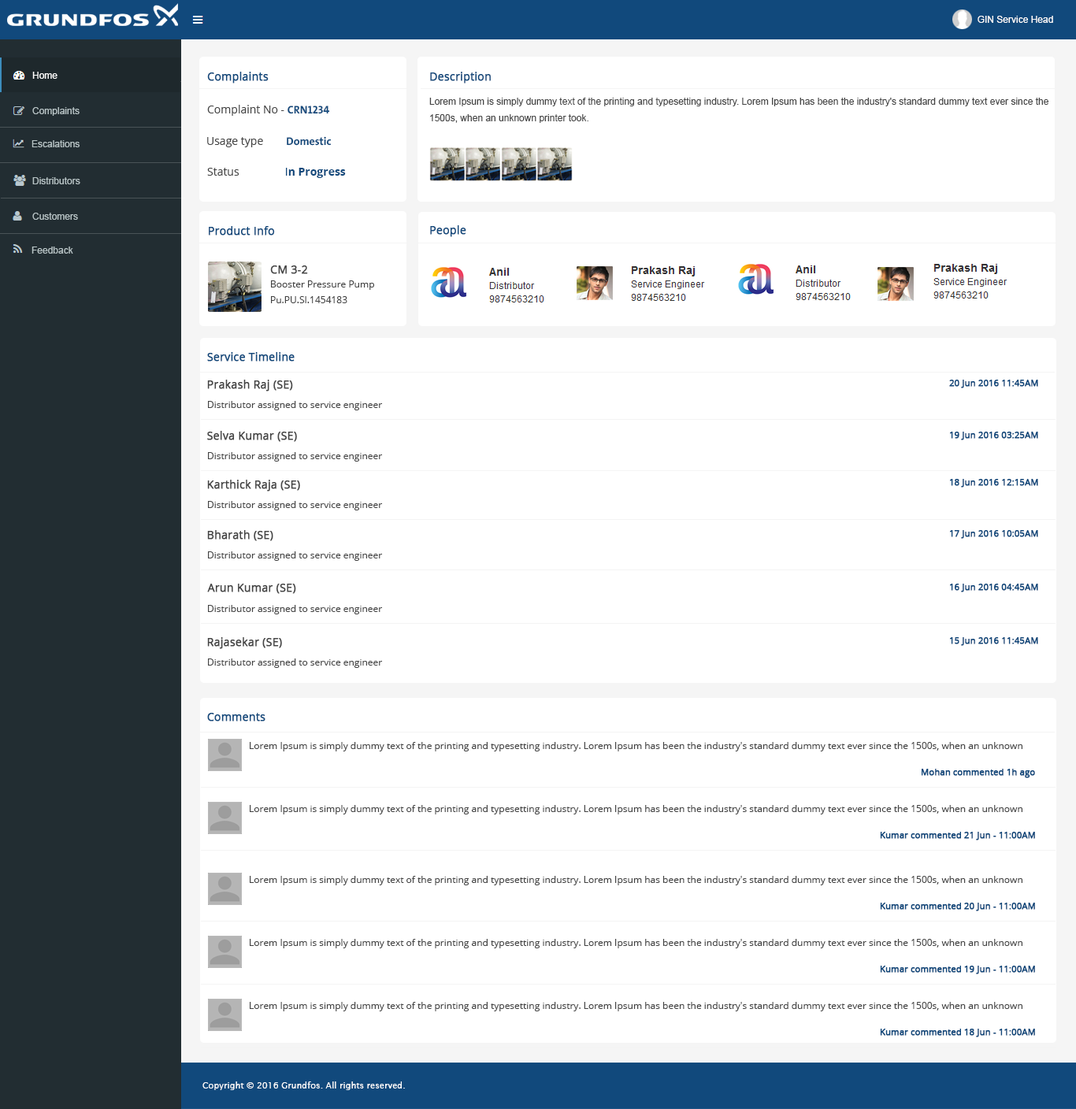
<style>
.page{position:relative;width:1076px;height:1109px;background:#ffffff}
.page>*{position:absolute;margin:0}
.t1{font:9.4px "ArialMT";color:#fffefd}
.t2{font:9.4px "ArialMT";color:#ffffff}
.t3{font:11px "OpenSans";color:#11497c;font-weight:bold}
.t4{font:11px "OpenSans"}
.t5{font:9.4px/16.5px "ArialMT";color:#444444}
.t6{font:9.4px "ArialMT";color:#b8c4c6}
.t7{font:11px "OpenSans";color:#444444}
.t8{font:11px "GrundfosTheSansOT-7B";color:#11497c}
.t9{font:11px "OpenSans-Bold";color:#11497c}
.t10{font:11px "OpenSans";color:#11497c}
.t11{font:11px "OpenSans";color:#444444;font-weight:bold}
.t12{font:9.4px "OpenSans";color:#444444}
.t13{font:8.7px "OpenSans";color:#11497c;font-weight:bold}
.t14{font:8.7px "LucidaSans";color:#fdffff}
</style>
<div class="page">
<p class="t1" style="left:977px;top:16px;width:76px;height:7px">GIN Service Head</p>
<p class="t2" style="left:32px;top:72px;width:25px;height:7px">Home</p>
<p class="t3" style="left:207px;top:72px;width:62px;height:11px">Complaints</p>
<p class="t4" style="left:430px;top:72px;width:57px;height:11px">Description</p>
<p class="t3" style="left:430px;top:72px;width:61px;height:11px">Description</p>
<p class="t5" style="left:429px;top:98px;width:619px;height:25px">Lorem Ipsum is simply dummy text of the printing and typesetting industry. Lorem Ipsum has been the industry's standard dummy text ever since the <br>1500s, when an unknown printer took.</p>
<p class="t6" style="left:32px;top:107px;width:48px;height:9px">Complaints</p>
<p class="t7" style="left:207px;top:105px;width:123px;height:11px">Complaint No - <span class="t8">CRN1234</span></p>
<p class="t7" style="left:207px;top:136px;width:124px;height:11px">Usage type        <span class="t8">Domestic</span></p>
<p class="t6" style="left:31px;top:140px;width:49px;height:7px">Escalations</p>
<p class="t9" style="left:207px;top:168px;width:139px;height:10px"><span class="t7"><br>Status                </span><span class="t10">I</span>n Progress</p>
<p class="t6" style="left:32px;top:177px;width:48px;height:7px">Distributors</p>
<p class="t6" style="left:32px;top:213px;width:46px;height:7px">Customers</p>
<p class="t3" style="left:209px;top:226px;width:66px;height:9px"><span class="t10"> </span>Product Info</p>
<p class="t3" style="left:430px;top:225px;width:36px;height:12px">People</p>
<p class="t6" style="left:31px;top:246px;width:42px;height:8px">Feedback</p>
<p class="t11" style="left:270px;top:265px;width:38px;height:9px">CM 3-2</p>
<p class="t12" style="left:271px;top:280px;width:103px;height:10px">Booster Pressure Pump</p>
<p class="t12" style="left:271px;top:296px;width:76px;height:7px">Pu.PU.SI.1454183</p>
<p class="t3" style="left:207px;top:352px;width:87px;height:9px"><span class="t10"> </span>Service Timeline</p>
<p class="t11" style="left:207px;top:380px;width:86px;height:11px">Prakash Raj (SE)</p>
<p class="t13" style="left:949px;top:380px;width:89px;height:8px">20 Jun 2016 11:45AM</p>
<p class="t12" style="left:208px;top:401px;width:175px;height:9px">Distributor assigned to service engineer</p>
<p class="t11" style="left:207px;top:431px;width:90px;height:11px">Selva Kumar (SE)</p>
<p class="t13" style="left:950px;top:431px;width:88px;height:9px">19 Jun 2016 03:25AM</p>
<p class="t12" style="left:208px;top:452px;width:175px;height:9px">Distributor assigned to service engineer</p>
<p class="t11" style="left:207px;top:480px;width:93px;height:11px">Karthick Raja (SE)</p>
<p class="t13" style="left:950px;top:479px;width:88px;height:8px">18 Jun 2016 12:15AM</p>
<p class="t12" style="left:208px;top:501px;width:175px;height:9px">Distributor assigned to service engineer</p>
<p class="t11" style="left:207px;top:530px;width:66px;height:11px">Bharath (SE)</p>
<p class="t13" style="left:950px;top:530px;width:88px;height:9px">17 Jun 2016 10:05AM</p>
<p class="t12" style="left:208px;top:551px;width:175px;height:10px">Distributor assigned to service engineer</p>
<p class="t11" style="left:207px;top:583px;width:89px;height:11px">Arun Kumar (SE)</p>
<p class="t13" style="left:950px;top:583px;width:88px;height:9px">16 Jun 2016 04:45AM</p>
<p class="t12" style="left:208px;top:605px;width:175px;height:9px">Distributor assigned to service engineer</p>
<p class="t11" style="left:207px;top:637px;width:75px;height:12px">Rajasekar (SE)</p>
<p class="t13" style="left:950px;top:637px;width:88px;height:9px">15 Jun 2016 11:45AM</p>
<p class="t12" style="left:208px;top:658px;width:175px;height:10px">Distributor assigned to service engineer</p>
<p class="t3" style="left:207px;top:713px;width:58px;height:8px"><span class="t10"> </span>Comments</p>
<p class="t12" style="left:250px;top:742px;width:772px;height:9px">Lorem Ipsum is simply dummy text of the printing and typesetting industry. Lorem Ipsum has been the industry's standard dummy text ever since the 1500s, when an unknown</p>
<p class="t13" style="left:921px;top:768px;width:114px;height:10px">Mohan commented 1h ago</p>
<p class="t12" style="left:250px;top:805px;width:772px;height:9px">Lorem Ipsum is simply dummy text of the printing and typesetting industry. Lorem Ipsum has been the industry's standard dummy text ever since the 1500s, when an unknown</p>
<p class="t13" style="left:880px;top:831px;width:155px;height:9px">Kumar commented 21 Jun - 11:00AM</p>
<p class="t12" style="left:250px;top:876px;width:772px;height:9px">Lorem Ipsum is simply dummy text of the printing and typesetting industry. Lorem Ipsum has been the industry's standard dummy text ever since the 1500s, when an unknown</p>
<p class="t13" style="left:880px;top:902px;width:155px;height:9px">Kumar commented 20 Jun - 11:00AM</p>
<p class="t12" style="left:250px;top:939px;width:772px;height:9px">Lorem Ipsum is simply dummy text of the printing and typesetting industry. Lorem Ipsum has been the industry's standard dummy text ever since the 1500s, when an unknown</p>
<p class="t13" style="left:880px;top:965px;width:155px;height:9px">Kumar commented 19 Jun - 11:00AM</p>
<p class="t12" style="left:250px;top:1002px;width:772px;height:9px">Lorem Ipsum is simply dummy text of the printing and typesetting industry. Lorem Ipsum has been the industry's standard dummy text ever since the 1500s, when an unknown</p>
<p class="t13" style="left:880px;top:1028px;width:155px;height:9px">Kumar commented 18 Jun - 11:00AM</p>
<p class="t14" style="left:202px;top:1081px;width:203px;height:9px">Copyright © 2016 Grundfos. All rights reserved.</p>
</div>
